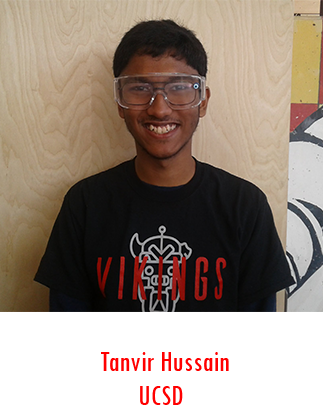
<style>
.page{position:relative;width:323px;height:420px;background:#ffffff}
.page>*{position:absolute;margin:0}
.t1{font:30px "TwCenMT-Condensed";color:#ff0000}
</style>
<div class="page">
<p class="t1" style="left:101px;top:352px;width:128px;height:19px">Tanvir Hussain</p>
<p class="t1" style="left:140px;top:386px;width:43px;height:19px">UCSD</p>
</div>
